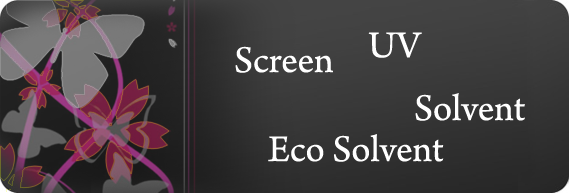
<style>
.page{position:relative;width:572px;height:193px}
.page>*{position:absolute;margin:0}
.t1{font:39.5px "ArnoPro-Regular";color:#ffffff}
</style>
<div class="page">
<p class="t1" style="left:368px;top:32px;width:54px;height:26px">UV</p>
<p class="t1" style="left:235px;top:46px;width:98px;height:27px">Screen</p>
<p class="t1" style="left:415px;top:93px;width:110px;height:28px">Solvent</p>
<p class="t1" style="left:268px;top:134px;width:176px;height:28px">Eco Solvent</p>
</div>
